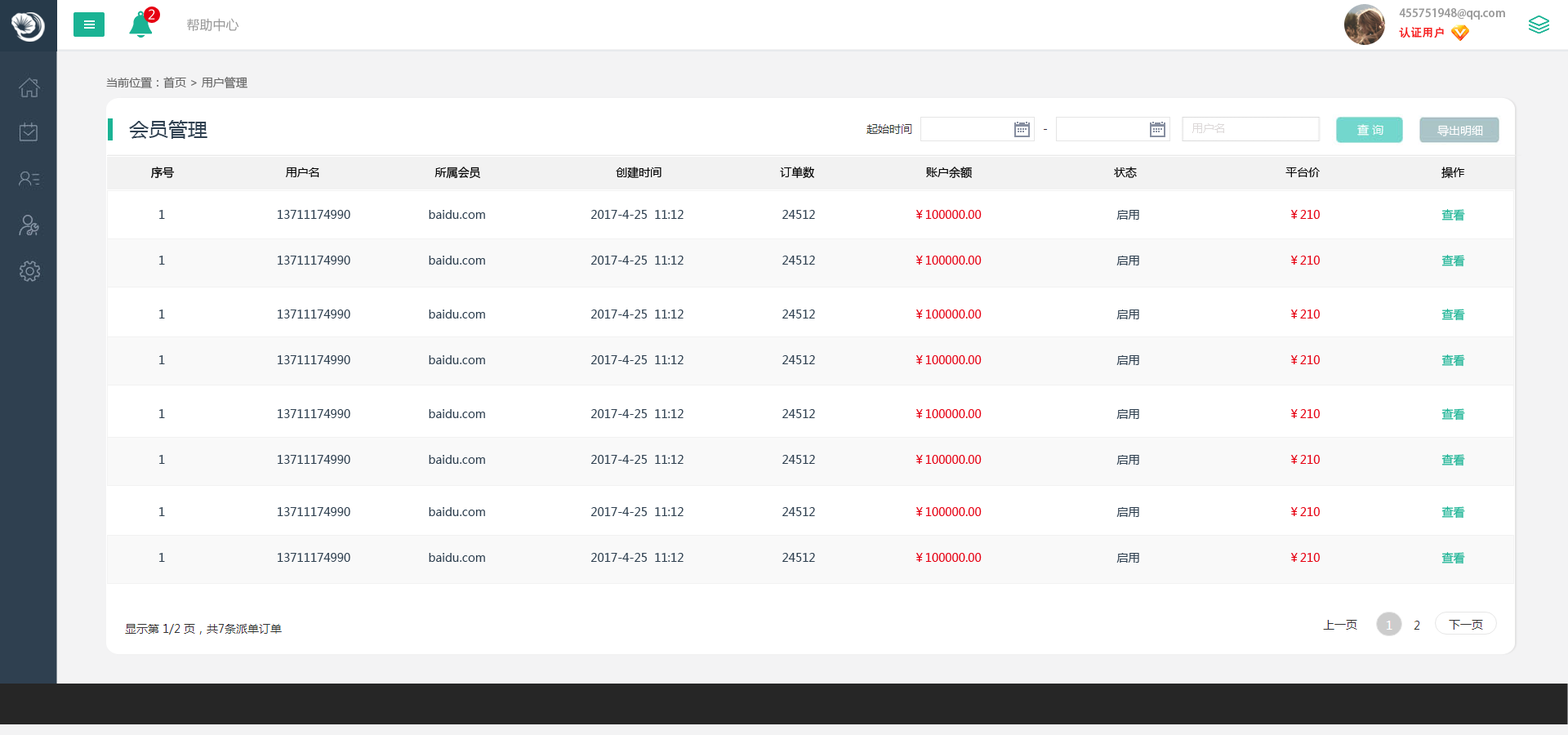
<style>
.page{position:relative;width:1568px;height:735px;background:#ffffff}
.page>*{position:absolute;margin:0}
.t1{font:13.1px "MicrosoftYaHei";color:#ffffff}
.t2{font:13.1px "MicrosoftYaHei";color:#999999}
.t3{font:11.4px/19.6px "AdobeHeitiStd-Regular";color:#999999}
.t4{font:11.4px/19.6px "AdobeHeitiStd-Regular";color:#f61e1e}
.t5{font:11.4px/19.6px "AdobeHeitiStd-Regular";color:#ffffff}
.t6{font:11.4px "MicrosoftYaHei";color:#666666}
.t7{font:19.6px "MicrosoftYaHei";color:#2f4050}
.t8{font:11.4px "MicrosoftYaHei";color:#dcd8d8}
.t9{font:11.4px "MicrosoftYaHei";color:#ffffff}
.t10{font:11.4px "MicrosoftYaHei";color:#000000}
.t11{font:11.4px "MicrosoftYaHei";color:#2f4050}
.t12{font:11.4px "MicrosoftYaHei";color:#e60012}
.t13{font:11.4px "MicrosoftYaHei";color:#1ab394}
</style>
<div class="page">
<p class="t1" style="left:148px;top:9px;width:7px;height:11px">2</p>
<p class="t2" style="left:187px;top:18px;width:52px;height:14px">帮助中心</p>
<p class="t3" style="left:1399px;top:8px;width:106px;height:30px">455751948@qq.com<br><span class="t4">认证用户               </span><span class="t5">退出</span></p>
<p class="t6" style="left:106px;top:77px;width:141px;height:12px">当前位置：首页 &gt; 用户管理</p>
<p class="t7" style="left:129px;top:120px;width:78px;height:19px">会员管理</p>
<p class="t8" style="left:1192px;top:123px;width:32px;height:10px">用户名</p>
<p class="t9" style="left:1437px;top:125px;width:46px;height:11px">导出明细</p>
<p class="t10" style="left:151px;top:167px;width:1314px;height:12px">序号                                 用户名                                  所属会员                                        创建时间                                   订单数                                 账户余额                                          状态                                            平台价                                    操作</p>
<p class="t11" style="left:159px;top:209px;width:1306px;height:12px">1                                 13711174990                       baidu.com                               2017-4-25  11:12                             24512                             <span class="t12">￥100000.00                                        </span>启用                                            <span class="t12">￥210                                    </span><span class="t13">查看</span></p>
<p class="t11" style="left:159px;top:255px;width:1306px;height:12px">1                                 13711174990                       baidu.com                               2017-4-25  11:12                             24512                             <span class="t12">￥100000.00                                        </span>启用                                            <span class="t12">￥210                                    </span><span class="t13">查看</span></p>
<p class="t11" style="left:159px;top:309px;width:1306px;height:12px">1                                 13711174990                       baidu.com                               2017-4-25  11:12                             24512                             <span class="t12">￥100000.00                                        </span>启用                                            <span class="t12">￥210                                    </span><span class="t13">查看</span></p>
<p class="t11" style="left:159px;top:354px;width:1306px;height:13px">1                                 13711174990                       baidu.com                               2017-4-25  11:12                             24512                             <span class="t12">￥100000.00                                        </span>启用                                            <span class="t12">￥210                                    </span><span class="t13">查看</span></p>
<p class="t11" style="left:159px;top:408px;width:1306px;height:13px">1                                 13711174990                       baidu.com                               2017-4-25  11:12                             24512                             <span class="t12">￥100000.00                                        </span>启用                                            <span class="t12">￥210                                    </span><span class="t13">查看</span></p>
<p class="t11" style="left:159px;top:454px;width:1306px;height:12px">1                                 13711174990                       baidu.com                               2017-4-25  11:12                             24512                             <span class="t12">￥100000.00                                        </span>启用                                            <span class="t12">￥210                                    </span><span class="t13">查看</span></p>
<p class="t11" style="left:159px;top:506px;width:1306px;height:13px">1                                 13711174990                       baidu.com                               2017-4-25  11:12                             24512                             <span class="t12">￥100000.00                                        </span>启用                                            <span class="t12">￥210                                    </span><span class="t13">查看</span></p>
<p class="t11" style="left:159px;top:552px;width:1306px;height:12px">1                                 13711174990                       baidu.com                               2017-4-25  11:12                             24512                             <span class="t12">￥100000.00                                        </span>启用                                            <span class="t12">￥210                                    </span><span class="t13">查看</span></p>
</div>
